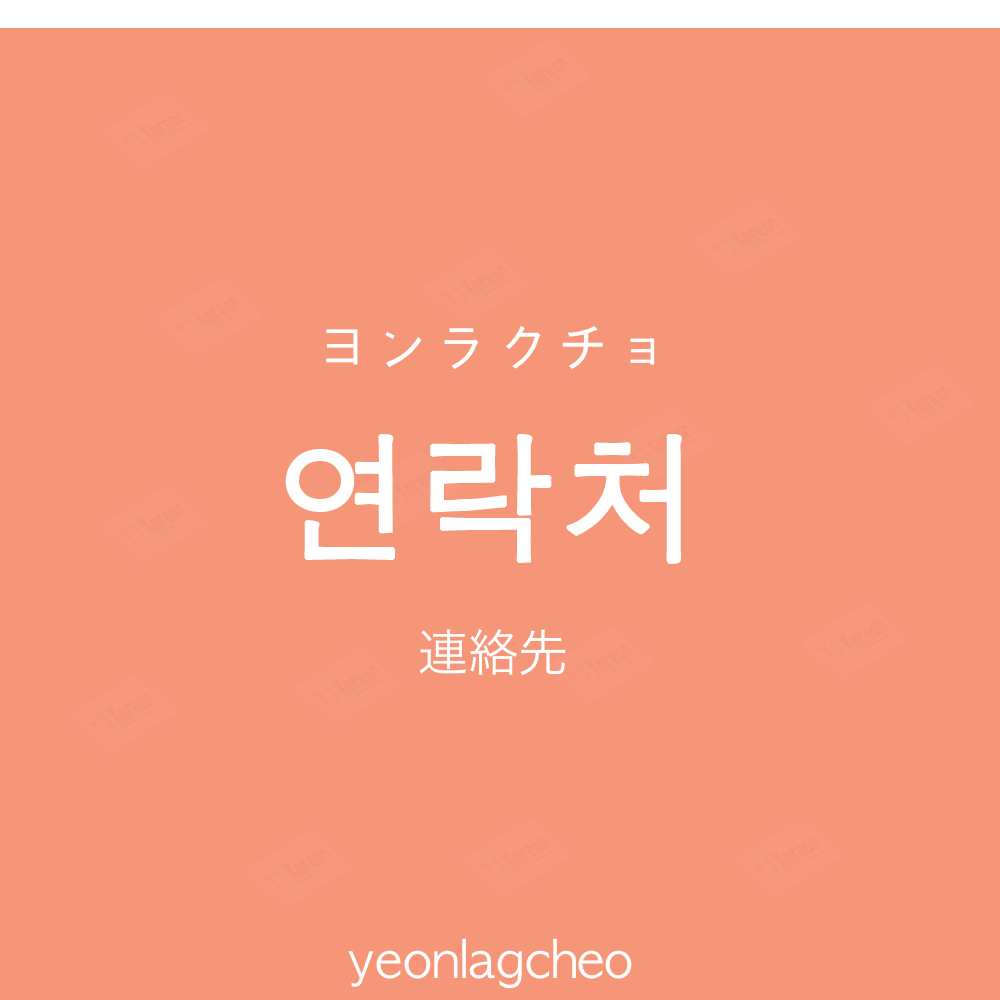
<style>
.page{position:relative;width:1000px;height:1000px;background:#f69679}
.page>*{position:absolute;margin:0}
.t1{font:60px "AppleGothic";color:#ffffff}
.t2{font:140px "AppleGothic";color:#ffffff;font-weight:bold}
.t3{font:50px "HiraKakuProN-W3";color:#ffffff}
.t4{font:50px "AppleGothic";color:#ffffff}
</style>
<div class="page">
<p class="t1" style="left:326px;top:326px;width:329px;height:43px">ヨンラクチョ</p>
<p class="t2" style="left:285px;top:434px;width:397px;height:130px">연락처</p>
<p class="t3" style="left:419px;top:629px;width:147px;height:46px">連絡先</p>
<p class="t4" style="left:348px;top:938px;width:284px;height:51px">yeonlagcheo</p>
</div>
